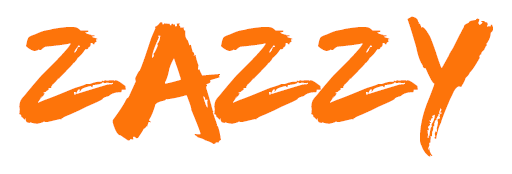
<style>
.page{position:relative;width:512px;height:174px;background:#ffffff}
.page>*{position:absolute;margin:0}
.t1{font:91px "BrownFox";color:#fd740a}
</style>
<div class="page">
<p class="t1" style="left:19px;top:16px;width:474px;height:141px">ZAZZY</p>
</div>
